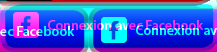
<style>
.page{position:relative;width:217px;height:52px}
.page>*{position:absolute;margin:0}
.t1{font:13.9px "MyriadPro-Semibold"}
</style>
<div class="page">
<p class="t1" style="left:47px;top:20px;width:156px;height:10px">Connexion avec Facebook</p>
</div>
